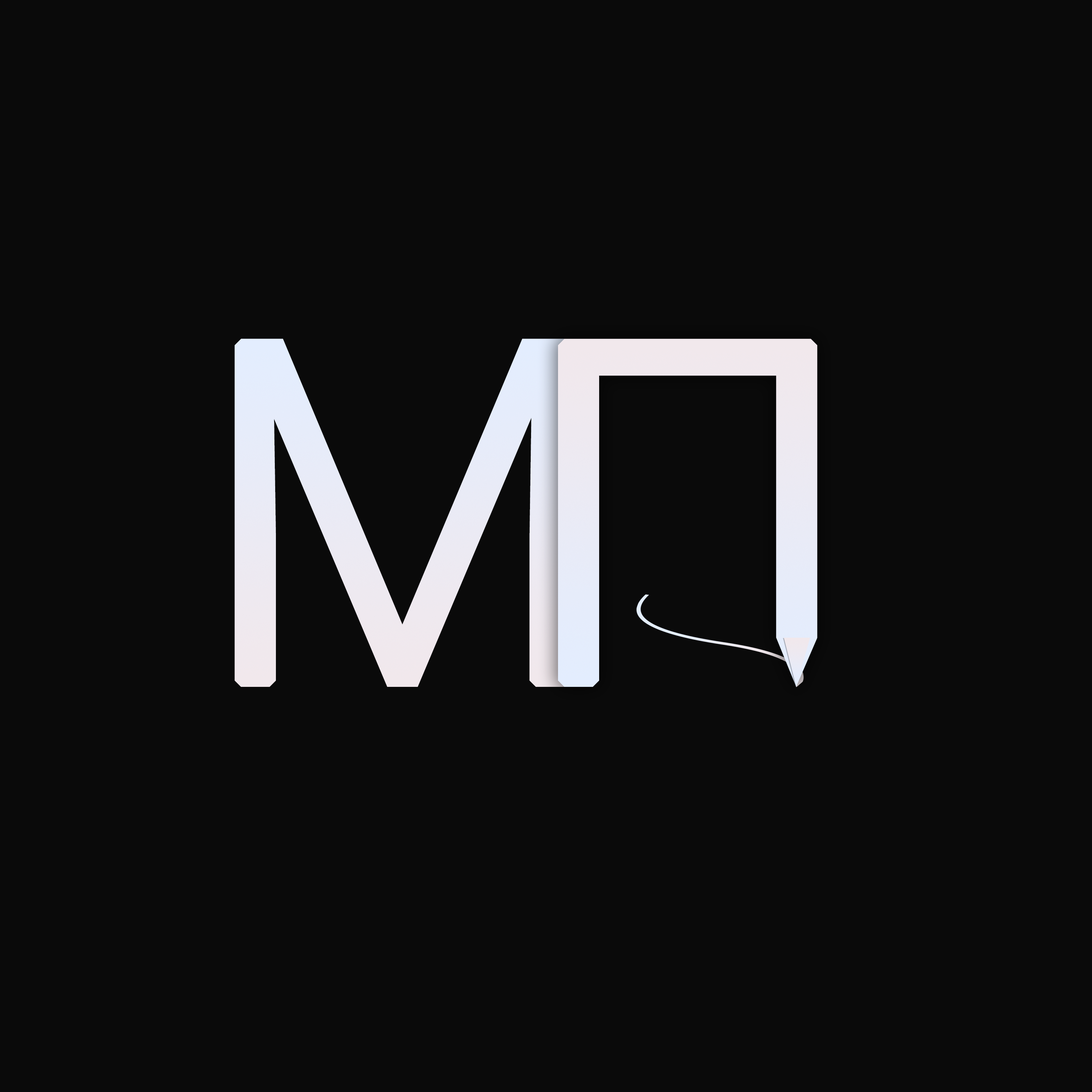
<style>
.page{position:relative;width:1092px;height:1092px;background:#0a0a0a}
.page>*{position:absolute;margin:0}
.t1{font:471.7px "Roboto-Light";color:#e9eaf3;font-weight:bold}
</style>
<div class="page">
<p class="t1" style="left:234px;top:339px;width:337px;height:348px">М</p>
</div>
